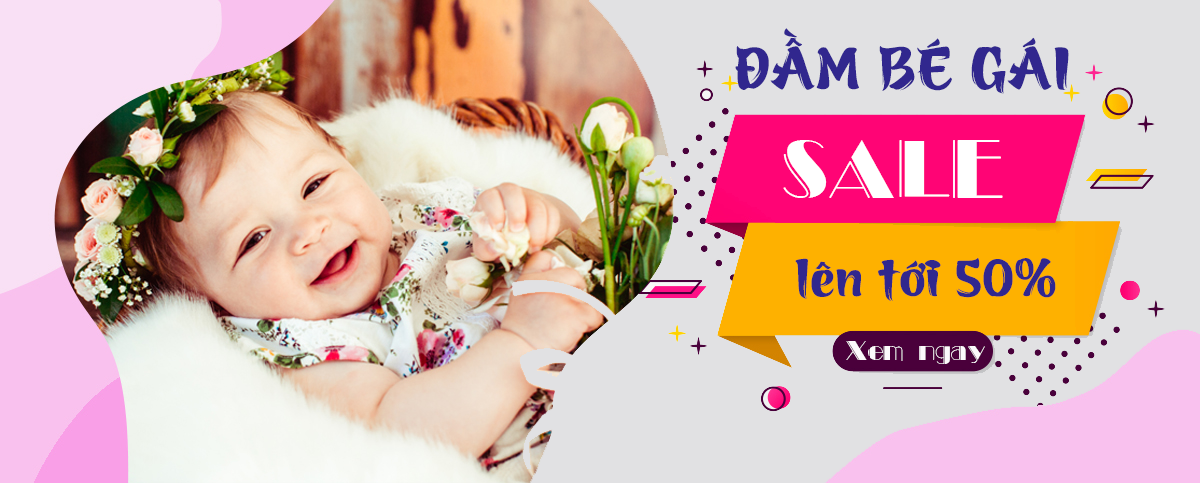
<style>
.page{position:relative;width:1200px;height:483px;background:#e1e1e3}
.page>*{position:absolute;margin:0}
.t1{font:66.7px "UTM-Azuki";color:#31278e}
.t2{font:75px "SFUBalletEngraved";color:#ffffff}
.t3{font:58.3px "UTM-Azuki";color:#31278e}
.t4{font:25px "SFUBalletEngraved";color:#fcfafc}
</style>
<div class="page">
<p class="t1" style="left:735px;top:28px;width:334px;height:66px">ĐẦM BÉ GÁI</p>
<p class="t2" style="left:783px;top:140px;width:220px;height:58px">SALE</p>
<p class="t3" style="left:795px;top:258px;width:261px;height:43px">lên tới 50%</p>
<p class="t4" style="left:846px;top:341px;width:139px;height:23px">Xem ngay</p>
</div>
